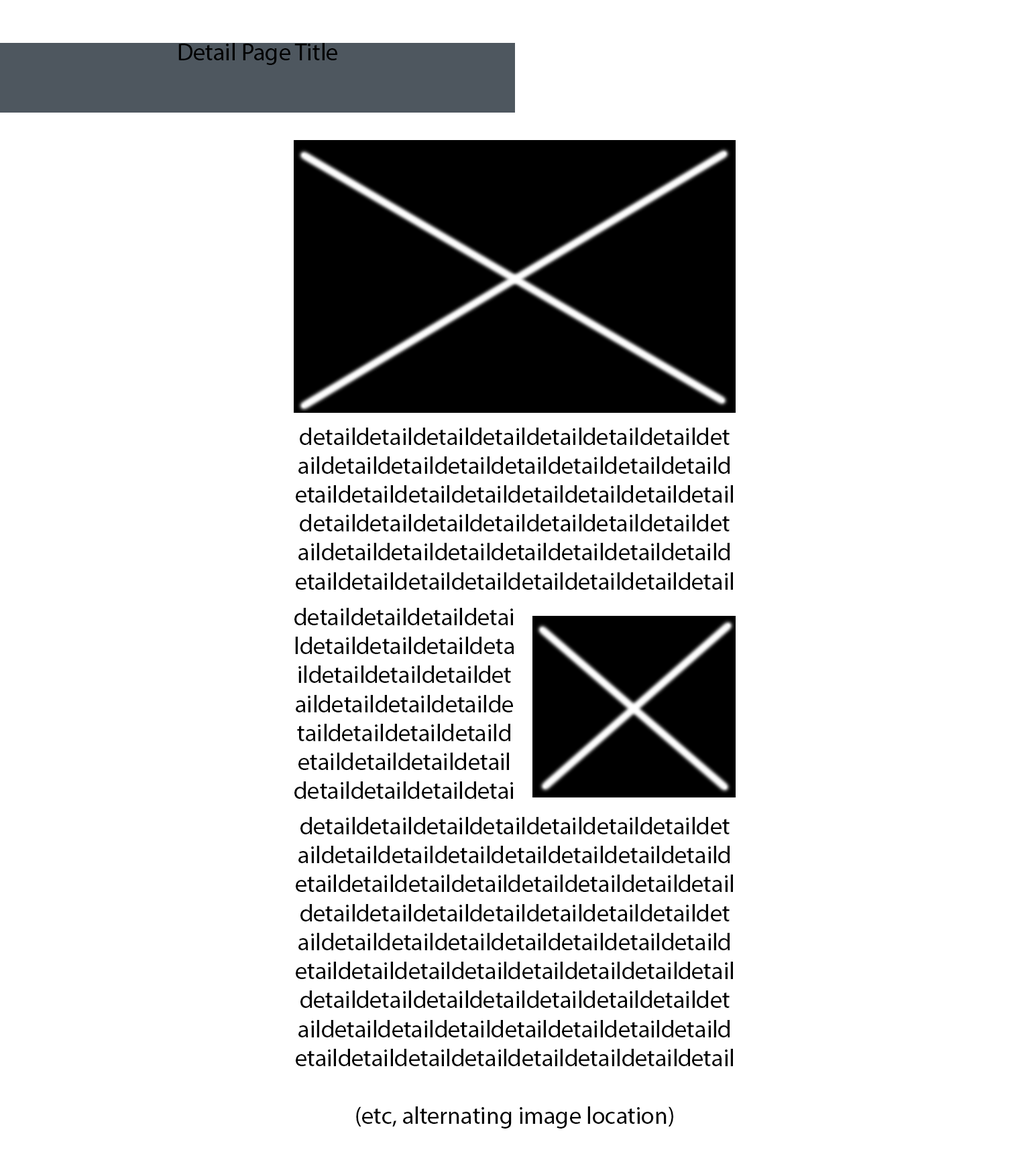
<style>
.page{position:relative;width:1030px;height:1158px;background:#ffffff}
.page>*{position:absolute;margin:0}
.t1{font:24.1px "MyriadPro-Regular";color:#000000}
</style>
<div class="page">
<p class="t1" style="left:178px;top:43px;width:159px;height:22px">Detail Page Title</p>
<p class="t1" style="left:296px;top:428px;width:437px;height:162px;text-align:center">detaildetaildetaildetaildetaildetaildetaildetaildetaildetaildetaildetaildetaildetaildetaildetaildetaildetaildetaildetaildetaildetaildetaildetaildetaildetaildetaildetaildetaildetaildetaildetaildetaildetaildetaildetaildetaildetaildetaildetaildetaildetaildetaildetaildetaildetaildetaildetaildetail</p>
<p class="t1" style="left:294px;top:608px;width:220px;height:191px;text-align:center">detaildetaildetaildetaildetaildetaildetaildetaildetaildetaildetaildetaildetaildetaildetaildetaildetaildetaildetaildetaildetaildetaildetaildetaildetaildetaildetaildetail</p>
<p class="t1" style="left:296px;top:817px;width:437px;height:312px;text-align:center">detaildetaildetaildetaildetaildetaildetaildetaildetaildetaildetaildetaildetaildetaildetaildetaildetaildetaildetaildetaildetaildetaildetaildetaildetaildetaildetaildetaildetaildetaildetaildetaildetaildetaildetaildetaildetaildetaildetaildetaildetaildetaildetaildetaildetaildetaildetaildetaildetaildetaildetaildetaildetaildetaildetaildetaildetaildetaildetaildetaildetaildetaildetaildetaildetaildetaildetaildetaildetail<br><br>(etc, alternating image location)</p>
</div>
